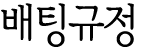
<style>
.page{position:relative;width:143px;height:51px;background:#ffffff}
.page>*{position:absolute;margin:0}
.t1{font:45.1px "YDIYMjO230";letter-spacing:-0.05em;color:#000000;scale:0.9 1}
</style>
<div class="page">
<p class="t1" style="left:1px;top:3px;width:133px;height:44px">배팅규정</p>
</div>
